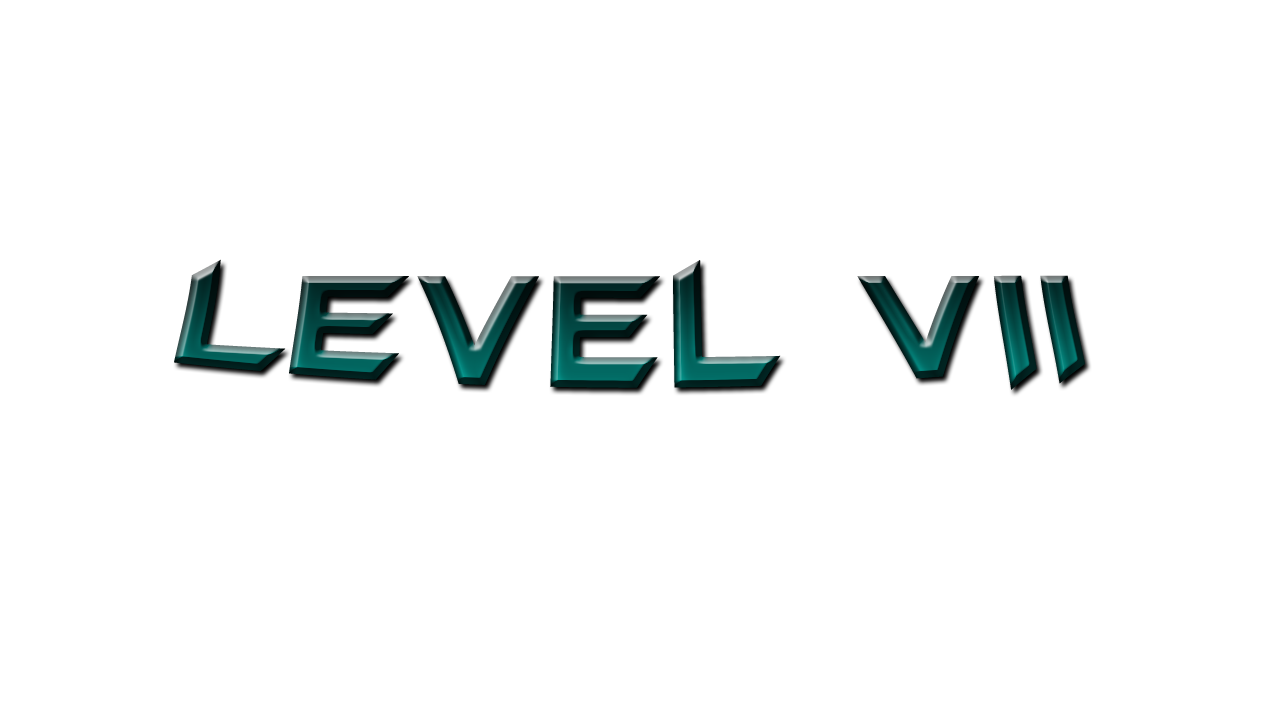
<style>
.page{position:relative;width:1280px;height:720px;background:#ffffff}
.page>*{position:absolute;margin:0}
.t1{font:150px "BatmanForeverAlternate";text-transform:uppercase}
</style>
<div class="page">
<p class="t1" style="left:174px;top:259px;width:911px;height:131px">Level vii</p>
</div>
